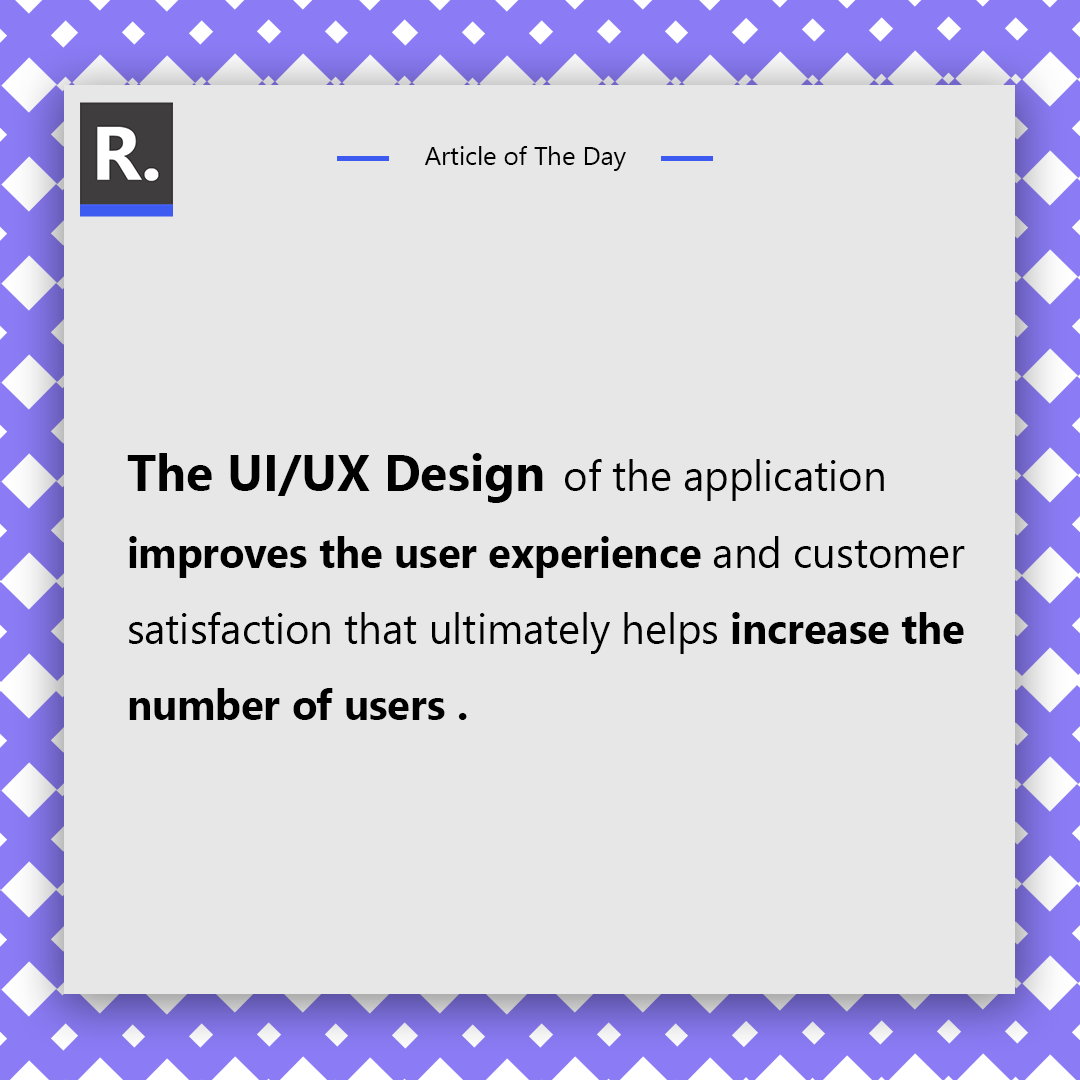
<style>
.page{position:relative;width:1080px;height:1080px;background:#e7e7e7}
.page>*{position:absolute;margin:0}
.t1{font:25.7px "SegoeUI";color:#000000}
.t2{font:41.7px/76.3px "SegoeUI";color:#000000}
.t3{font:50px/76.3px "SegoeUI-Bold";color:#000000}
.t4{font:41.7px/76.3px "SegoeUI-Bold";color:#000000}
</style>
<div class="page">
<p class="t1" style="left:424px;top:146px;width:202px;height:25px">Article of The Day</p>
<p class="t2" style="left:127px;top:453px;width:838px;height:267px;text-align:right"><span class="t3">The UI/UX Design </span>of the application <br><span class="t4">improves the user experience</span> and customer satisfaction that ultimately helps <span class="t4">increase the number of users .</span></p>
</div>
